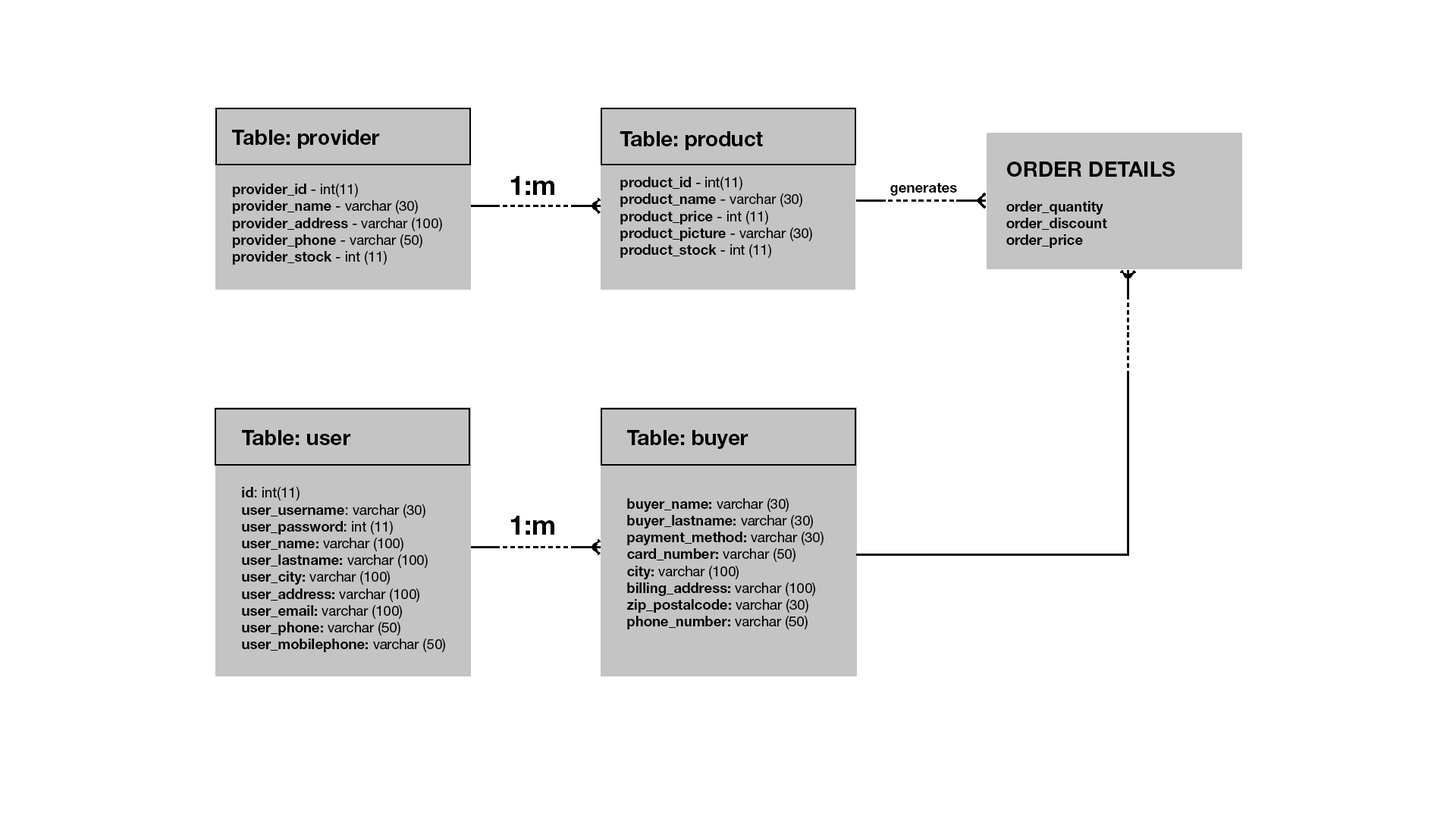
<style>
.page{position:relative;width:1456px;height:819px;background:#ffffff}
.page>*{position:absolute;margin:0}
.t1{font:21.1px "HelveticaNeueLTStd-Bd";color:#000000}
.t2{font:14px "HelveticaNeueLTStd-Bd";color:#000000}
.t3{font:14px "HelveticaNeueLTStd-Roman";color:#000000}
.t4{font:27.3px "HelveticaNeueLTStd-Bd";color:#000000}
.t5{font:21px "HelveticaNeueLTStd-Bd";color:#000000}
</style>
<div class="page">
<p class="t1" style="left:232px;top:130px;width:148px;height:19px">Table: provider</p>
<p class="t1" style="left:620px;top:131px;width:143px;height:19px">Table: product</p>
<p class="t1" style="left:1007px;top:162px;width:168px;height:15px">ORDER DETAILS</p>
<p class="t2" style="left:233px;top:184px;width:209px;height:81px">provider_id<span class="t3"> - int(11)<br></span>provider_name<span class="t3"> - varchar (30)<br></span>provider_address<span class="t3"> - varchar (100)<br></span>provider_phone<span class="t3"> - varchar (50)<br></span>provider_stock<span class="t3"> - int (11)</span></p>
<p class="t4" style="left:510px;top:176px;width:44px;height:19px">1:m</p>
<p class="t2" style="left:620px;top:177px;width:192px;height:81px">product_id<span class="t3"> - int(11)<br></span>product_name<span class="t3"> - varchar (30)<br></span>product_price<span class="t3"> - int (11)<br></span>product_picture<span class="t3"> - varchar (30)<br></span>product_stock<span class="t3"> - int (11)</span></p>
<p class="t2" style="left:890px;top:183px;width:67px;height:13px">generates</p>
<p class="t2" style="left:1006px;top:201px;width:101px;height:47px">order_quantity<br>order_discount<br>order_price</p>
<p class="t5" style="left:242px;top:430px;width:109px;height:15px">Table: user</p>
<p class="t5" style="left:627px;top:430px;width:121px;height:19px">Table: buyer</p>
<p class="t2" style="left:242px;top:487px;width:203px;height:165px">id<span class="t3">: int(11)<br></span>user_username<span class="t3">: varchar (30)<br></span>user_password<span class="t3">: int (11)<br></span>user_name: <span class="t3">varchar (100)<br></span>user_lastname: <span class="t3">varchar (100)<br></span>user_city: <span class="t3">varchar (100)<br></span>user_address:<span class="t3"> varchar (100)<br></span>user_email:<span class="t3"> varchar (100)<br></span>user_phone:<span class="t3"> varchar (50)<br></span>user_mobilephone:<span class="t3"> varchar (50)</span></p>
<p class="t2" style="left:627px;top:498px;width:197px;height:131px">buyer_name: <span class="t3">varchar (30)</span> <br>buyer_lastname: <span class="t3">varchar (30)<br></span>payment_method: <span class="t3">varchar (30)<br></span>card_number: <span class="t3">varchar (50)<br></span>city: <span class="t3">varchar (100)<br></span>billing_address: <span class="t3">varchar (100)<br></span>zip_postalcode: <span class="t3">varchar (30)<br></span>phone_number: <span class="t3">varchar (50)</span></p>
<p class="t4" style="left:510px;top:516px;width:44px;height:19px">1:m</p>
</div>
